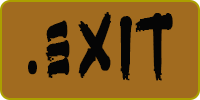
<style>
.page{position:relative;width:200px;height:100px;background:#a16b1f}
.page>*{position:absolute;margin:0}
.t1{font:100px "Fujimaru-Regular";color:#050505;font-weight:bold;scale:0.6 1}
.t2{font:100px "MyriadPro-Regular";color:#050505;font-weight:bold;scale:0.6 1}
</style>
<div class="page">
<p class="t1" style="left:28px;top:12px;width:145px;height:69px"><span class="t2">.</span>eXIT</p>
</div>
